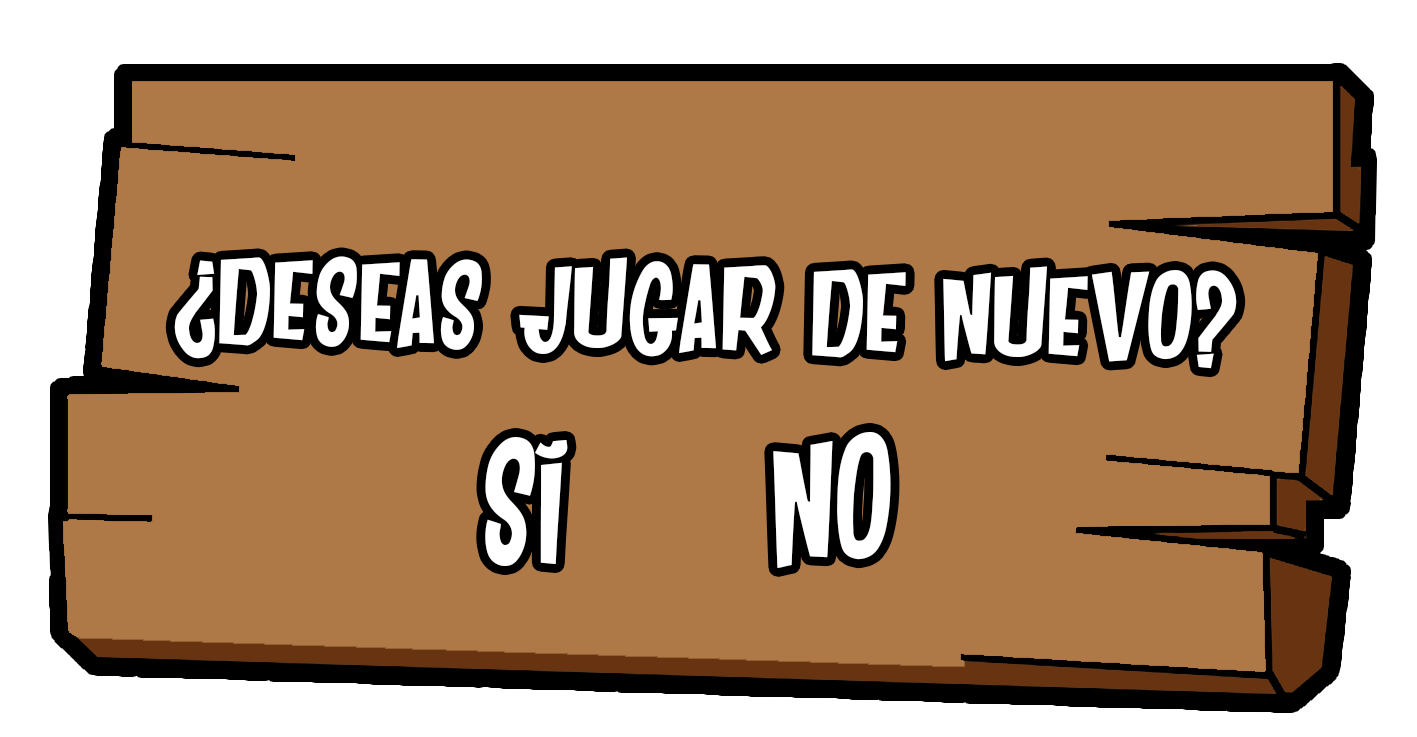
<style>
.page{position:relative;width:1417px;height:737px;background:#af7947}
.page>*{position:absolute;margin:0}
.t1{font:119.4px "DANCING-JUNGLE";color:#ffffff;scale:1.15 1}
.t2{font:170px "DANCING-JUNGLE";color:#ffffff}
</style>
<div class="page">
<p class="t1" style="left:174px;top:256px;width:1063px;height:113px;rotate:1deg">¿DESEAS JUGAR DE NUEVO?</p>
<p class="t2" style="left:485px;top:432px;width:406px;height:136px">SÍ     NO</p>
</div>
